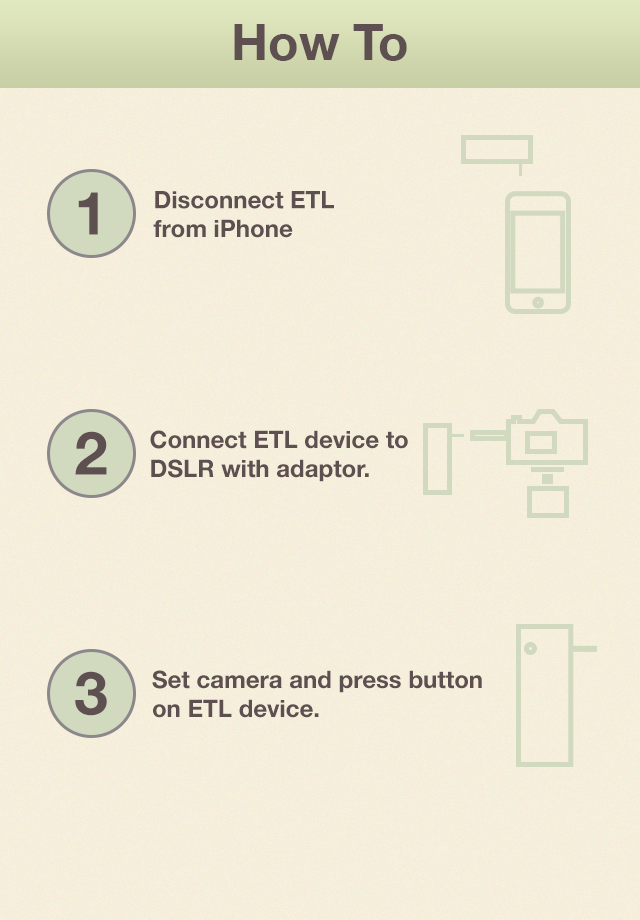
<style>
.page{position:relative;width:640px;height:920px}
.page>*{position:absolute;margin:0}
.t1{font:50px "HelveticaNeue-Bold";color:#5e5050}
.t2{font:60px "HelveticaNeue-Bold";color:#5e5050}
.t3{font:24px "HelveticaNeue-Bold";color:#5e5050}
</style>
<div class="page">
<p class="t1" style="left:234px;top:24px;width:173px;height:37px">How To</p>
<p class="t2" style="left:78px;top:192px;width:20px;height:43px">1</p>
<p class="t3" style="left:153px;top:191px;width:181px;height:47px">Disconnect ETL<br>from iPhone</p>
<p class="t2" style="left:75px;top:431px;width:32px;height:44px">2</p>
<p class="t3" style="left:150px;top:430px;width:258px;height:52px">Connect ETL device to<br>DSLR with adaptor.</p>
<p class="t2" style="left:75px;top:671px;width:32px;height:45px">3</p>
<p class="t3" style="left:152px;top:670px;width:330px;height:48px">Set camera and press button<br>on ETL device.</p>
</div>
